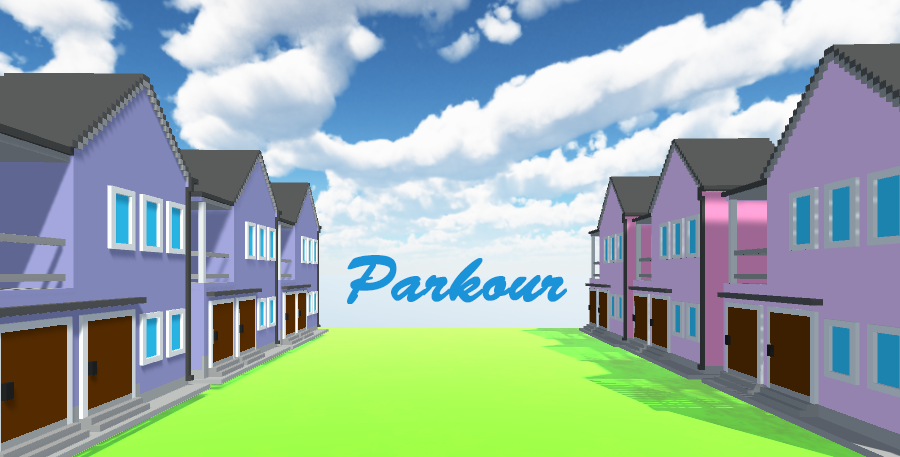
<style>
.page{position:relative;width:900px;height:457px}
.page>*{position:absolute;margin:0}
.t1{font:64px "BrushScriptStd";color:#1a93d9;font-weight:bold}
</style>
<div class="page">
<p class="t1" style="left:347px;top:255px;width:220px;height:49px">Parkour</p>
</div>
